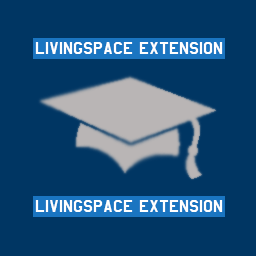
<style>
.page{position:relative;width:256px;height:256px;background:#003663}
.page>*{position:absolute;margin:0}
.t1{font:20px "AmarilloUSAF";color:#ffffff}
</style>
<div class="page">
<p class="t1" style="left:35px;top:42px;width:188px;height:12px">livingspace extension</p>
<p class="t1" style="left:35px;top:200px;width:188px;height:12px">livingspace extension</p>
</div>
